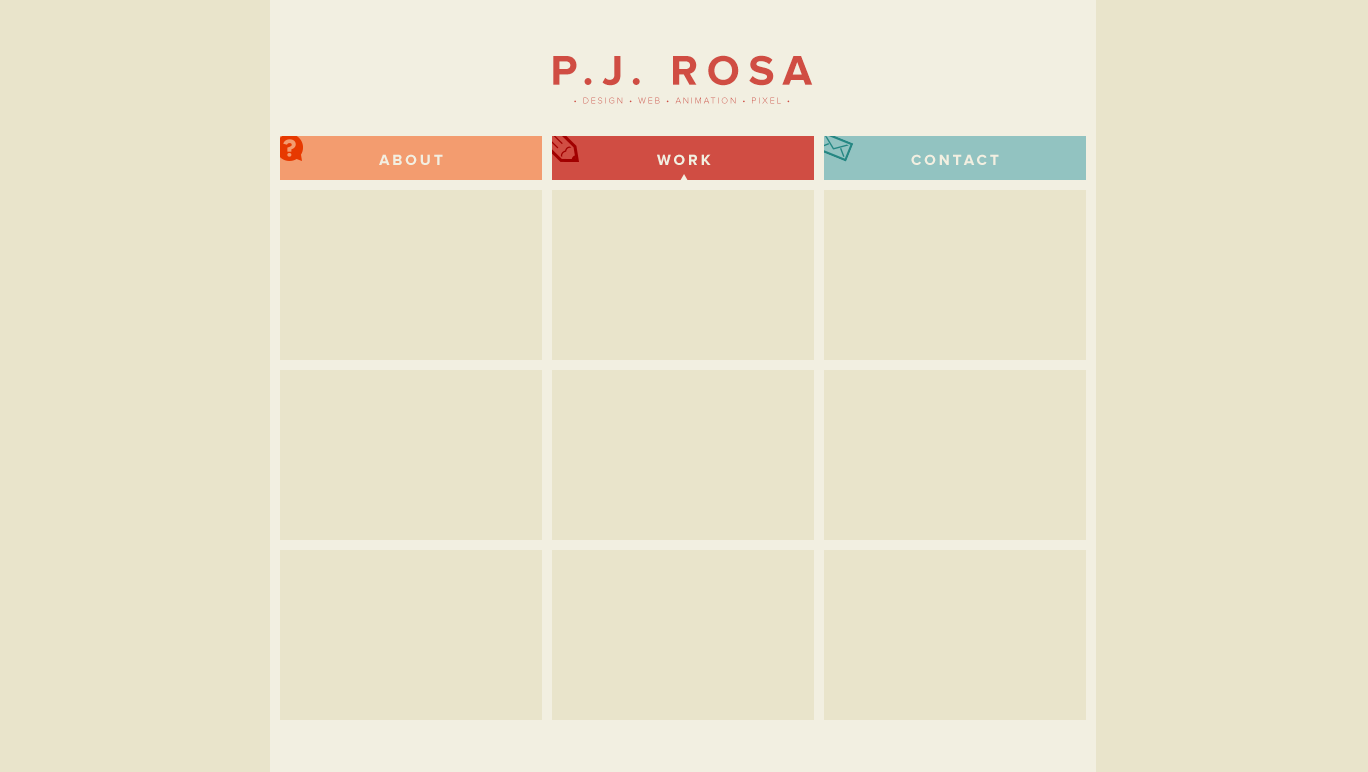
<style>
.page{position:relative;width:1368px;height:772px;background:#e9e4cb}
.page>*{position:absolute;margin:0}
.t1{font:43.3px "ProximaNova-Bold";letter-spacing:0.2em;color:#d04d43}
.t2{font:9px "ProximaNova-Light";letter-spacing:0.2em;color:#d04d43}
.t3{font:15.1px "ProximaNova-Bold";letter-spacing:0.2em;color:#f2efe1}
</style>
<div class="page">
<p class="t1" style="left:553px;top:55px;width:260px;height:31px">P.J. ROSA</p>
<p class="t2" style="left:574px;top:97px;width:216px;height:7px">• DESIGN • WEB • ANIMATION • PIXEL •</p>
<p class="t3" style="left:379px;top:154px;width:64px;height:11px">ABOUT</p>
<p class="t3" style="left:657px;top:154px;width:54px;height:11px">WORK</p>
<p class="t3" style="left:911px;top:154px;width:88px;height:11px">CONTACT</p>
</div>
